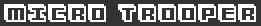
<style>
.page{position:relative;width:261px;height:26px;background:#333333}
.page>*{position:absolute;margin:0}
.t1{font:32px "3Dventure";color:#ffffff;text-transform:uppercase}
</style>
<div class="page">
<p class="t1" style="left:4px;top:4px;width:252px;height:18px">MICRO TROOPER</p>
</div>
